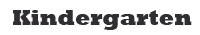
<style>
.page{position:relative;width:200px;height:35px;background:#ffffff}
.page>*{position:absolute;margin:0}
.t1{font:22px "Rockwell-ExtraBold";color:#302e32}
</style>
<div class="page">
<p class="t1" style="left:13px;top:10px;width:179px;height:20px">Kindergarten</p>
</div>
